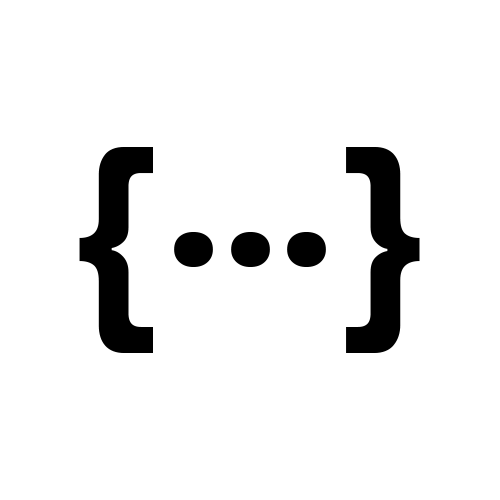
<style>
.page{position:relative;width:500px;height:500px;background:#ffffff}
.page>*{position:absolute;margin:0}
.t1{font:221px "PTSans-CaptionBold";color:#000000}
</style>
<div class="page">
<p class="t1" style="left:79px;top:147px;width:341px;height:206px">{   }</p>
<p class="t1" style="left:174px;top:232px;width:152px;height:35px">...</p>
</div>
